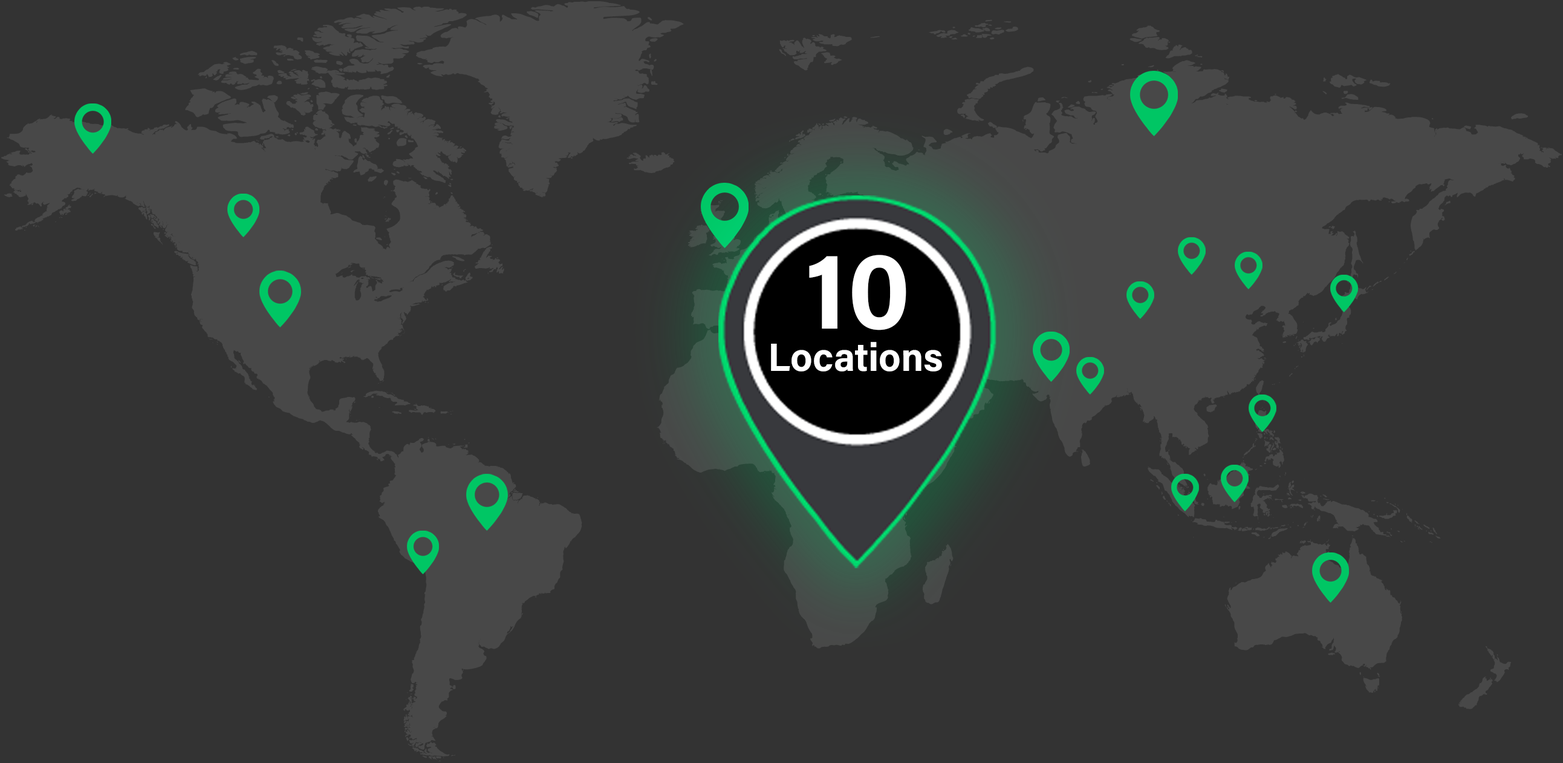
<style>
.page{position:relative;width:1563px;height:763px;background:#333333}
.page>*{position:absolute;margin:0}
.t1{font:109.7px "AcuminConcept-Bold";color:#ffffff;scale:0.97 1}
.t2{font:39.5px "AcuminConcept-Bold";color:#ffffff;scale:0.97 1}
</style>
<div class="page">
<p class="t1" style="left:809px;top:255px;width:98px;height:75px">10</p>
<p class="t2" style="left:771px;top:342px;width:171px;height:29px">Locations</p>
</div>
